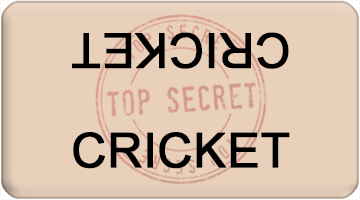
<style>
.page{position:relative;width:360px;height:200px;background:#e8d0bb}
.page>*{position:absolute;margin:0}
.t1{font:48px "ArialMT";color:#000000;font-weight:bold}
</style>
<div class="page">
<p class="t1" style="left:72px;top:32px;width:217px;height:37px;rotate:180deg">CRICKET</p>
<p class="t1" style="left:73px;top:132px;width:217px;height:37px">CRICKET</p>
</div>
